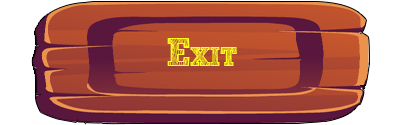
<style>
.page{position:relative;width:400px;height:125px;background:#ffffff}
.page>*{position:absolute;margin:0}
.t1{font:36px "WoodLook";color:#fffc1d}
</style>
<div class="page">
<p class="t1" style="left:167px;top:38px;width:70px;height:28px">Exit</p>
</div>
